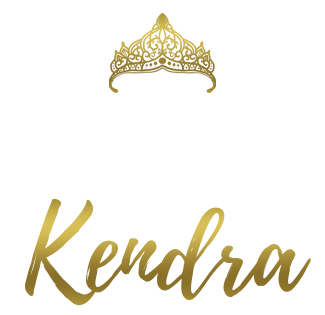
<style>
.page{position:relative;width:325px;height:315px;background:#ffffff}
.page>*{position:absolute;margin:0}
.t1{font:111.5px "Playlist-Script"}
</style>
<div class="page">
<p class="t1" style="left:24px;top:198px;width:287px;height:108px">Kendra</p>
</div>
